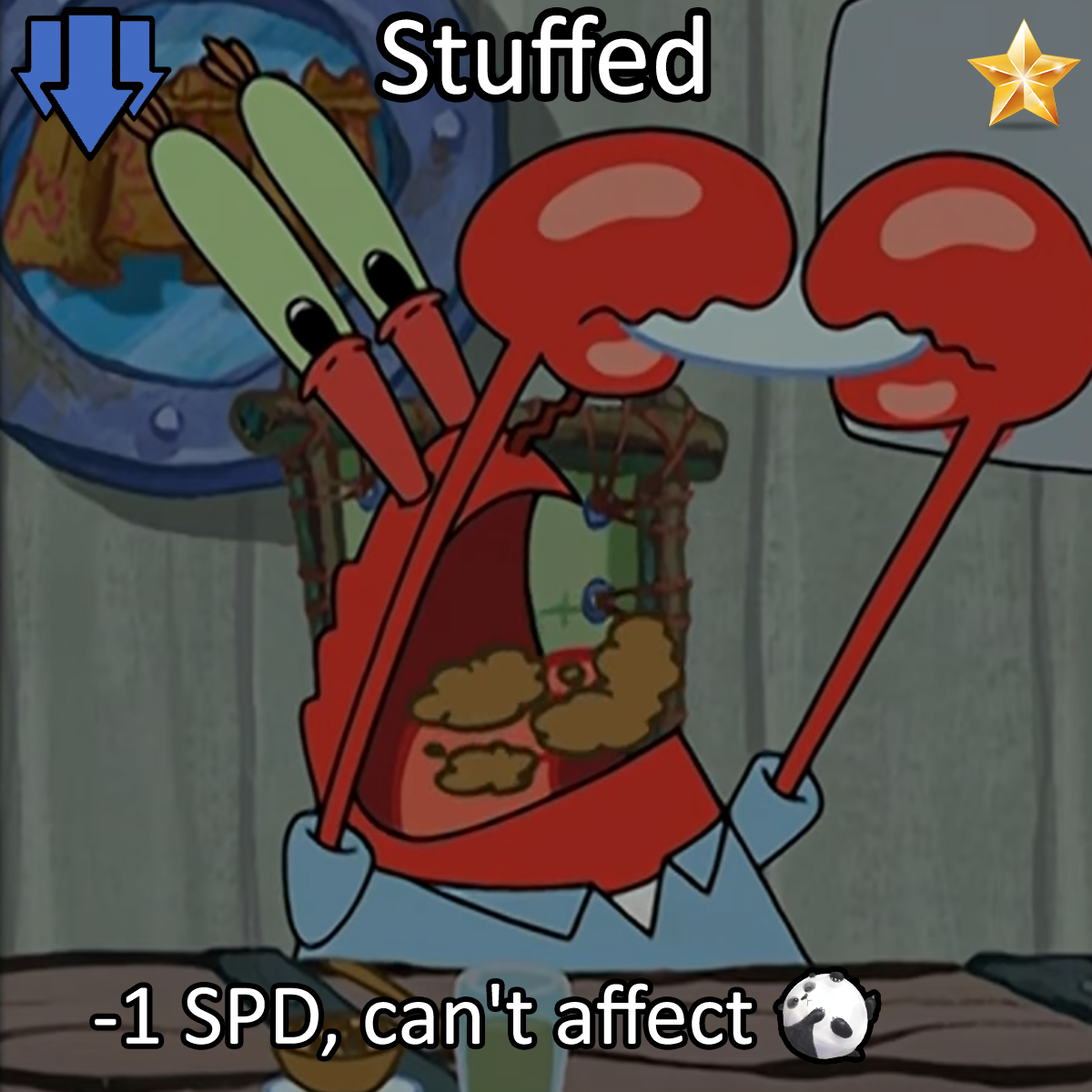
<style>
.page{position:relative;width:1092px;height:1092px}
.page>*{position:absolute;margin:0}
.t1{font:196.6px "Calibri";color:#ffffff}
.t2{font:150.1px "Calibri";color:#ffffff}
.t3{font:150.1px "stoogedings-Regular";color:#ffffff}
</style>
<div class="page">
<p class="t1" style="left:382px;top:15px;width:321px;height:80px">Stuffed</p>
<p class="t2" style="left:95px;top:971px;width:781px;height:88px">-1 SPD, can't affect <span class="t3">[panda]</span></p>
</div>
